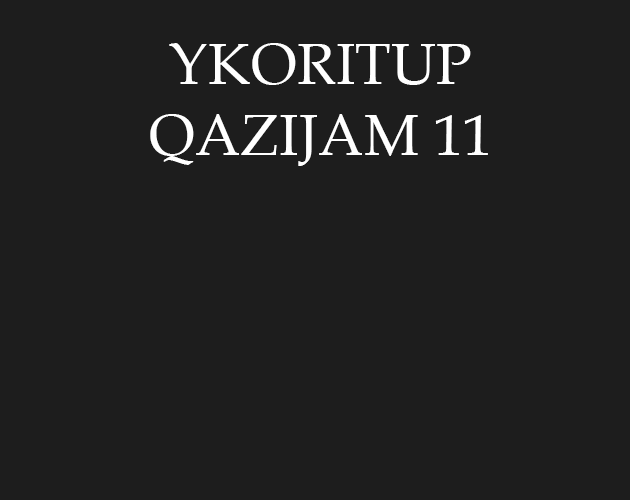
<style>
.page{position:relative;width:630px;height:500px;background:#1d1d1d}
.page>*{position:absolute;margin:0}
.t1{font:58.4px "BookAntiqua";color:#ffffff;text-transform:uppercase}
</style>
<div class="page">
<p class="t1" style="left:150px;top:43px;width:338px;height:123px;text-align:center">Ykoritup<br>Qazijam 11</p>
</div>
